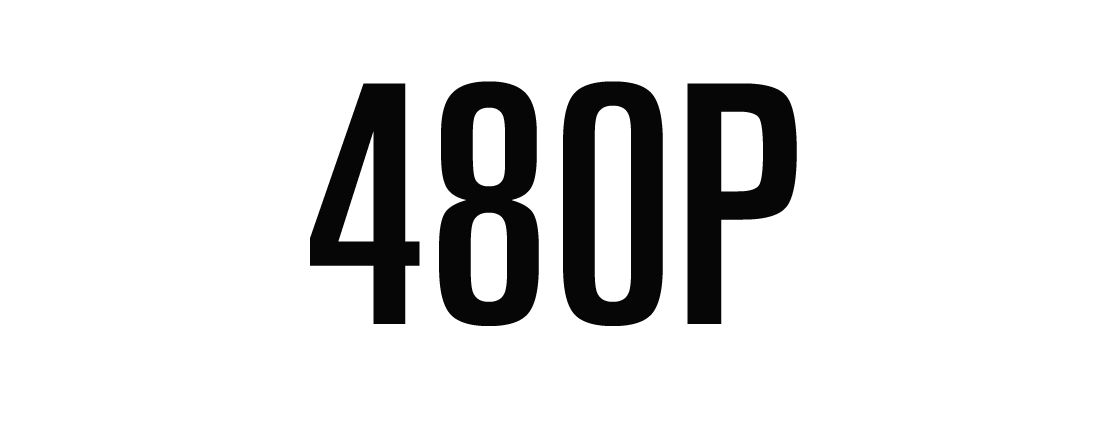
<style>
.page{position:relative;width:1116px;height:430px;background:#ffffff}
.page>*{position:absolute;margin:0}
.t1{font:333.3px "AeonMain";color:#060606}
</style>
<div class="page">
<p class="t1" style="left:310px;top:81px;width:487px;height:245px">480p</p>
</div>
